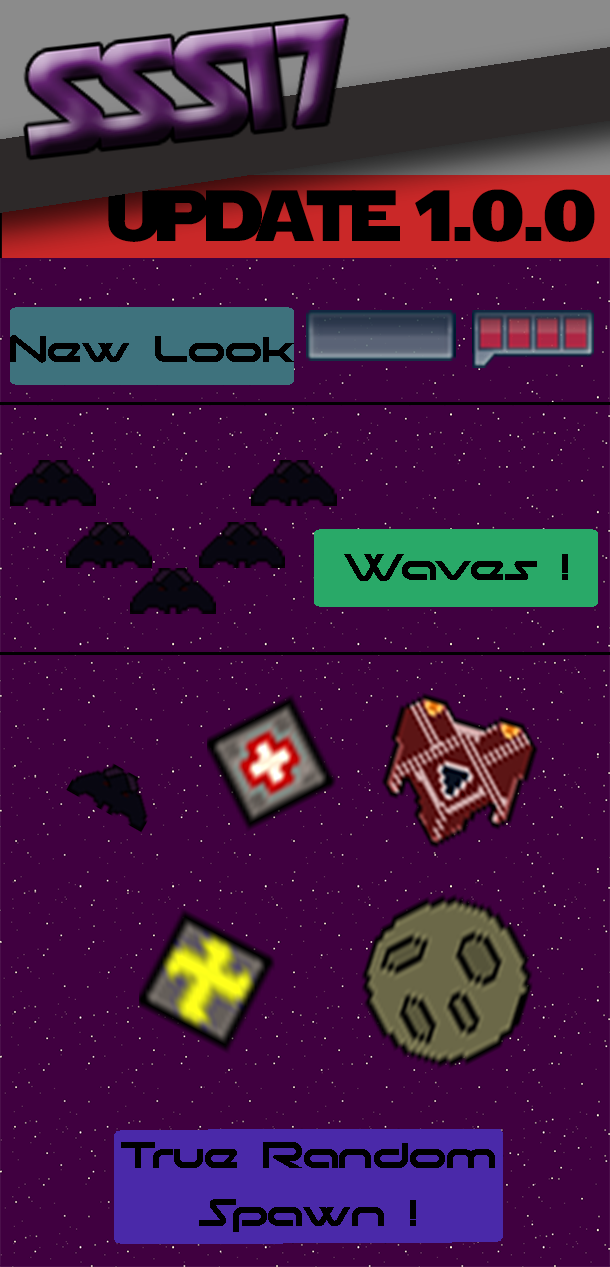
<style>
.page{position:relative;width:610px;height:1267px;background:#400040}
.page>*{position:absolute;margin:0}
.t1{font:72px "StarJedi";color:#000000}
.t2{font:48px "moonhouse";color:#000000}
</style>
<div class="page">
<p class="t1" style="left:108px;top:189px;width:487px;height:53px">update 1.0.0</p>
<p class="t2" style="left:10px;top:335px;width:284px;height:28px">New Look</p>
<p class="t2" style="left:344px;top:554px;width:224px;height:27px">Waves !</p>
<p class="t2" style="left:121px;top:1142px;width:374px;height:90px;text-align:center">True Random<br>Spawn !</p>
</div>
